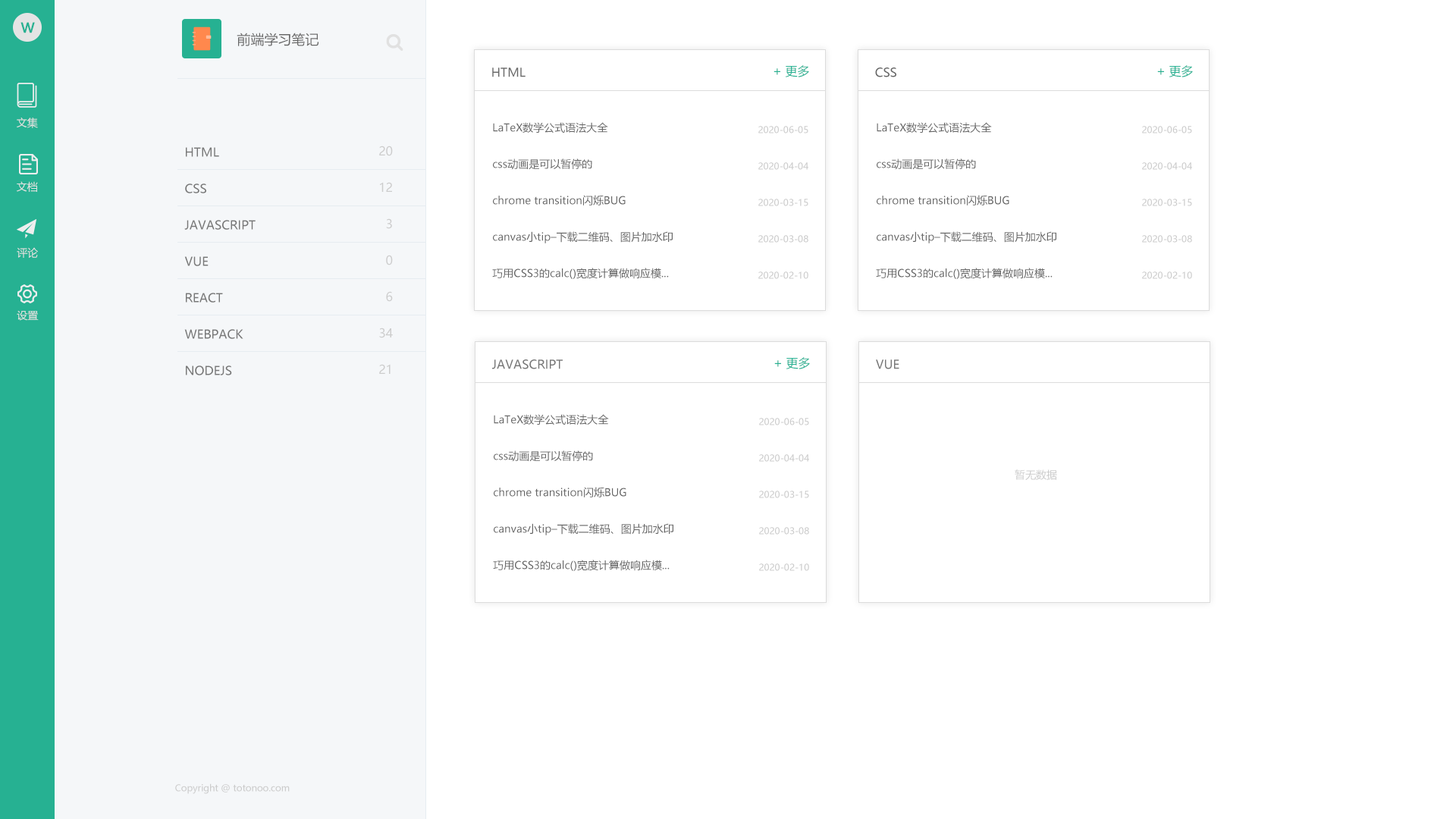
<style>
.page{position:relative;width:1456px;height:819px;background:#ffffff}
.page>*{position:absolute;margin:0}
.t1{font:13.6px "MicrosoftYaHei";color:#26b192;font-weight:bold}
.t2{font:13.6px "MicrosoftYaHei";color:#666666}
.t3{font:12.1px "MicrosoftYaHei";color:#26b192}
.t4{font:12.1px "MicrosoftYaHei";color:#666666}
.t5{font:10.6px "MicrosoftYaHei";color:#e4e4e4}
.t6{font:10.6px/36.4px "MicrosoftYaHei";color:#666666}
.t7{font:9.1px/36.4px "MicrosoftYaHei";color:#cccccc}
.t8{font:12.1px/36.4px "MicrosoftYaHei";color:#777777}
.t9{font:12.1px/36.4px "MicrosoftYaHei";color:#cccccc}
.t10{font:12.1px "MicrosoftYaHei";color:#777777}
.t11{font:10.6px "MicrosoftYaHei";color:#cccccc}
.t12{font:9.1px "MicrosoftYaHei";color:#cccccc}
</style>
<div class="page">
<p class="t1" style="left:20px;top:22px;width:15px;height:11px">W</p>
<p class="t2" style="left:237px;top:33px;width:82px;height:13px">前端学习笔记</p>
<p class="t3" style="left:773px;top:65px;width:36px;height:12px">+ 更多</p>
<p class="t3" style="left:1157px;top:65px;width:36px;height:12px">+ 更多</p>
<p class="t4" style="left:492px;top:67px;width:34px;height:10px">HTML</p>
<p class="t4" style="left:875px;top:67px;width:21px;height:10px">CSS</p>
<p class="t5" style="left:17px;top:118px;width:21px;height:10px">文集</p>
<p class="t6" style="left:492px;top:122px;width:181px;height:157px">LaTeX数学公式语法大全<br>css动画是可以暂停的<br>chrome transition闪烁BUG<br>canvas小tip–下载二维码、图片加水印<br>巧用CSS3的calc()宽度计算做响应模...</p>
<p class="t7" style="left:758px;top:126px;width:50px;height:153px">2020-06-05<br>2020-04-04<br>2020-03-15<br>2020-03-08<br>2020-02-10</p>
<p class="t6" style="left:876px;top:122px;width:180px;height:157px">LaTeX数学公式语法大全<br>css动画是可以暂停的<br>chrome transition闪烁BUG<br>canvas小tip–下载二维码、图片加水印<br>巧用CSS3的calc()宽度计算做响应模...</p>
<p class="t7" style="left:1142px;top:126px;width:50px;height:153px">2020-06-05<br>2020-04-04<br>2020-03-15<br>2020-03-08<br>2020-02-10</p>
<p class="t8" style="left:184px;top:147px;width:72px;height:228px">HTML<br>CSS<br>JAVASCRIPT<br>VUE<br>REACT<br>WEBPACK<br>NODEJS</p>
<p class="t9" style="left:379px;top:146px;width:14px;height:228px;text-align:right">20<br>12<br>3<br>0<br>6<br>34<br>21</p>
<p class="t5" style="left:17px;top:181px;width:21px;height:11px">文档</p>
<p class="t5" style="left:17px;top:247px;width:21px;height:11px">评论</p>
<p class="t5" style="left:17px;top:310px;width:22px;height:11px">设置</p>
<p class="t10" style="left:492px;top:359px;width:71px;height:10px">JAVASCRIPT</p>
<p class="t3" style="left:774px;top:357px;width:36px;height:12px">+ 更多</p>
<p class="t10" style="left:876px;top:359px;width:23px;height:10px">VUE</p>
<p class="t6" style="left:493px;top:414px;width:180px;height:157px">LaTeX数学公式语法大全<br>css动画是可以暂停的<br>chrome transition闪烁BUG<br>canvas小tip–下载二维码、图片加水印<br>巧用CSS3的calc()宽度计算做响应模...</p>
<p class="t7" style="left:759px;top:418px;width:50px;height:153px">2020-06-05<br>2020-04-04<br>2020-03-15<br>2020-03-08<br>2020-02-10</p>
<p class="t11" style="left:1015px;top:469px;width:42px;height:11px">暂无数据</p>
<p class="t12" style="left:175px;top:783px;width:115px;height:11px">Copyright @ totonoo.com</p>
</div>
